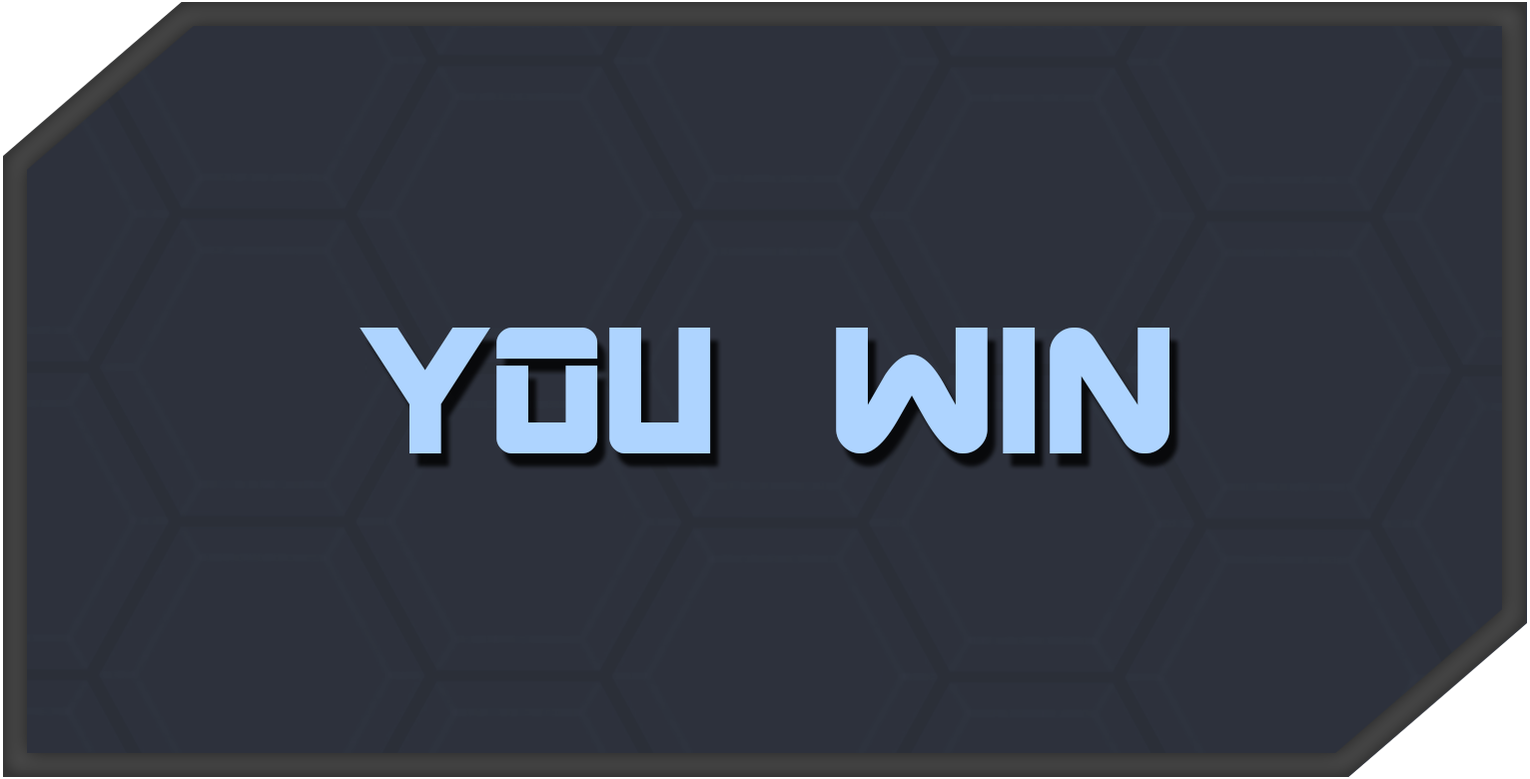
<style>
.page{position:relative;width:1530px;height:779px;background:#2d313c}
.page>*{position:absolute;margin:0}
.t1{font:199.8px "ARDESTINE";color:#aed4ff}
</style>
<div class="page">
<p class="t1" style="left:360px;top:328px;width:810px;height:126px">YOU WIN</p>
</div>
